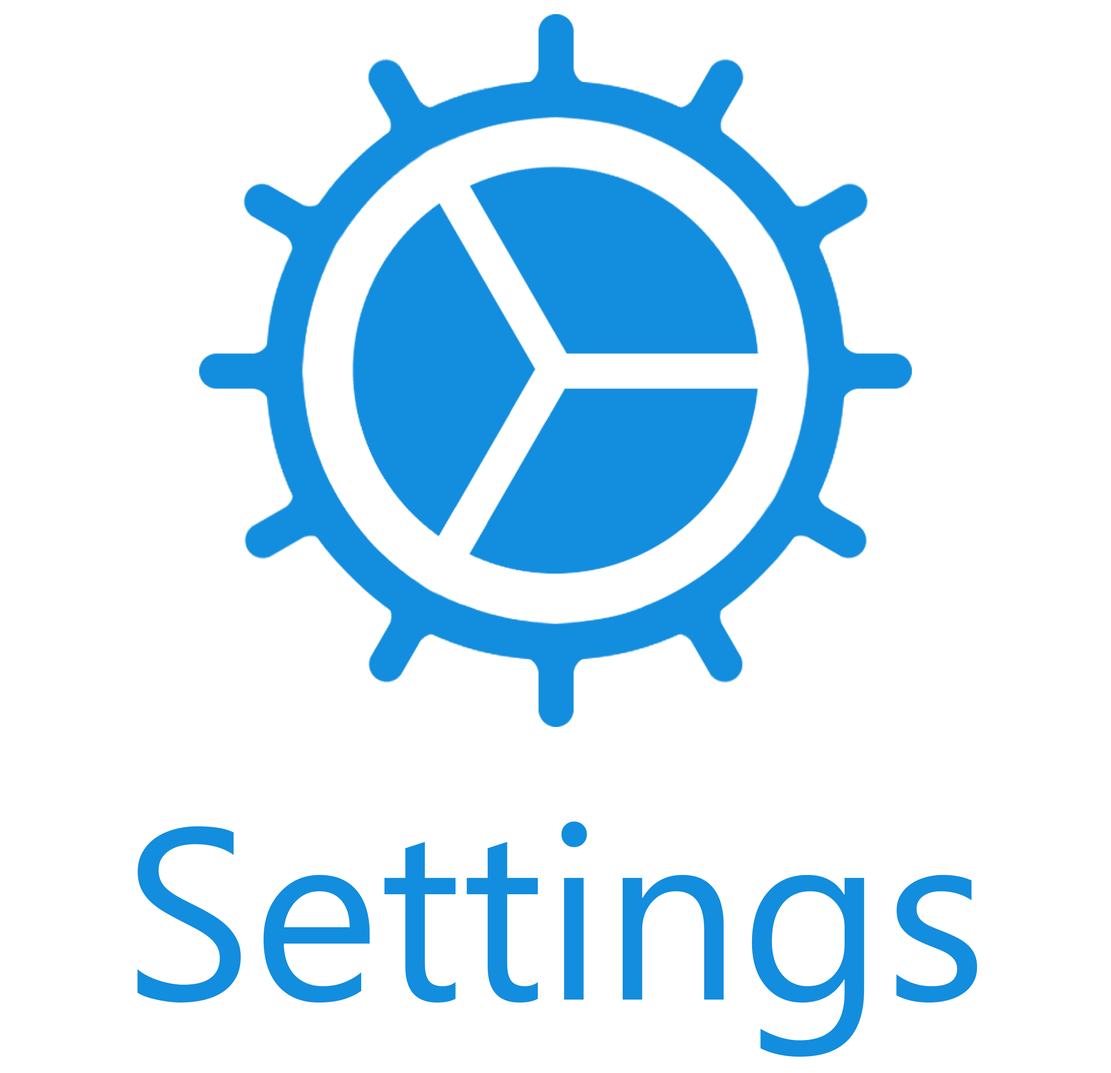
<style>
.page{position:relative;width:1111px;height:1073px;background:#ffffff}
.page>*{position:absolute;margin:0}
.t1{font:243.2px "LeelawadeeUI";color:#138dde}
</style>
<div class="page">
<p class="t1" style="left:137px;top:822px;width:840px;height:235px">Settings</p>
</div>
